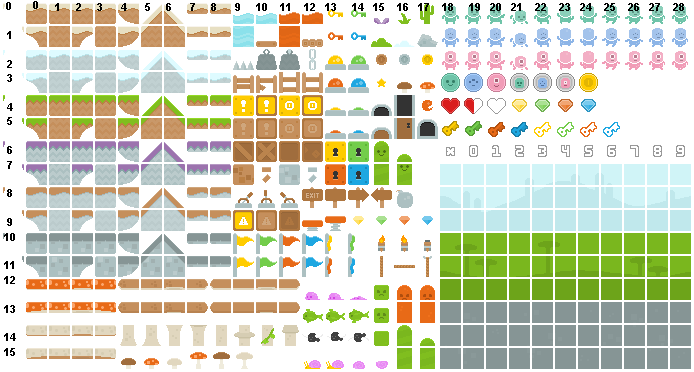
<style>
.page{position:relative;width:694px;height:372px;background:#ffffff}
.page>*{position:absolute;margin:0}
.t1{font:11px/14.4px "Arial-BoldMT";color:#000000}
.t2{font:11px "Arial-BoldMT";color:#000000}
</style>
<div class="page">
<p class="t1" style="left:4px;top:2px;width:12px;height:354px;text-align:center">0 <br><br>1<br><br>2<br>3<br><br>4<br>5<br><br>6<br>7<br><br>8<br><br>9<br>10<br><br>11<br>12<br><br>13<br><br>14<br>15</p>
<p class="t2" style="left:33px;top:1px;width:5px;height:8px">0</p>
</div>
